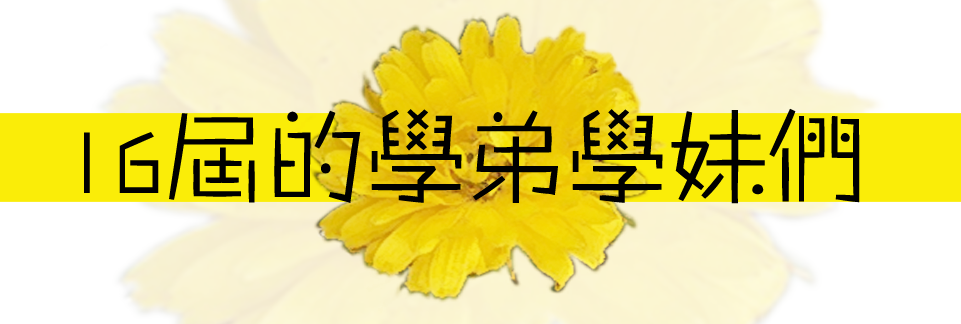
<style>
.page{position:relative;width:961px;height:324px;background:#ffffff}
.page>*{position:absolute;margin:0}
.t1{font:100.7px "FZZHYFW--GB1-0";color:#000000}
</style>
<div class="page">
<p class="t1" style="left:84px;top:108px;width:776px;height:96px">16届的学弟学妹们</p>
</div>
